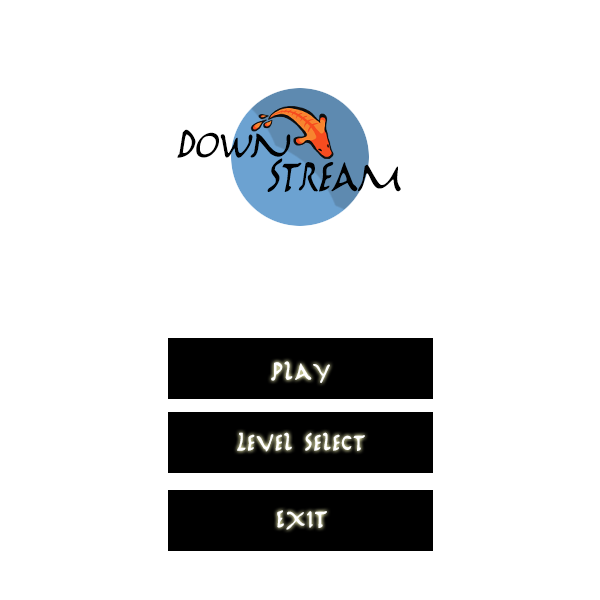
<style>
.page{position:relative;width:600px;height:600px;background:#ffffff}
.page>*{position:absolute;margin:0}
.t1{font:63.7px "Marathon";letter-spacing:-0.005em;color:#000000;font-style:italic;scale:0.91 1}
.t2{font:70.9px "Marathon";letter-spacing:-0.005em;color:#000000;font-style:italic;scale:0.81 1}
.t3{font:39px "Marathon";letter-spacing:0.025em;color:#ffffff;font-weight:bold;scale:0.9 1}
.t4{font:37px "Marathon";letter-spacing:0.025em;color:#ffffff;font-weight:bold;scale:0.9 1}
.t5{font:40.1px "Marathon";letter-spacing:0.025em;color:#ffffff;font-weight:bold;scale:0.88 1}
</style>
<div class="page">
<p class="t1" style="left:177px;top:129px;width:114px;height:29px">Down</p>
<p class="t2" style="left:267px;top:158px;width:134px;height:34px">Stream</p>
<p class="t3" style="left:271px;top:361px;width:59px;height:22px">Play</p>
<p class="t4" style="left:237px;top:432px;width:128px;height:20px">Level Select</p>
<p class="t5" style="left:277px;top:510px;width:50px;height:20px">Exit</p>
</div>
